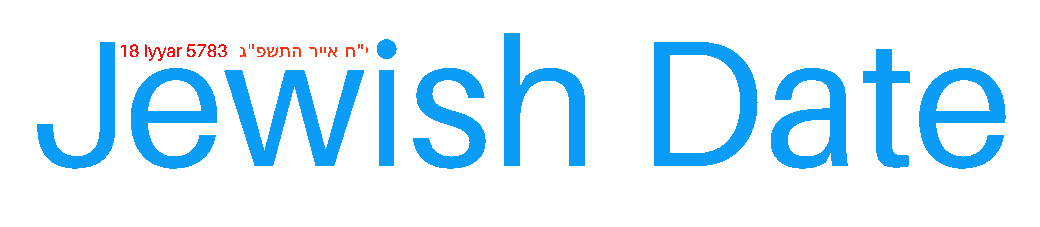
<style>
.page{position:relative;width:1040px;height:227px;background:#ffffff}
.page>*{position:absolute;margin:0}
.t1{font:180px "Aileron-Regular";color:#0a9cf7}
.t2{font:18px "Aileron-Regular";color:#f70a0a}
.t3{font:18px "DejaVuSans";color:#ff350d}
</style>
<div class="page">
<p class="t1" style="left:37px;top:32px;width:969px;height:137px">Jewish Date</p>
<p class="t2" style="left:120px;top:44px;width:107px;height:17px">18 Iyyar 5783</p>
<p class="t3" style="left:240px;top:43px;width:128px;height:15px">י"ח אייר התשפ"ג</p>
</div>
